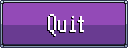
<style>
.page{position:relative;width:128px;height:48px;background:#934ab7}
.page>*{position:absolute;margin:0}
.t1{font:24px "Terminal";color:#ffffff}
</style>
<div class="page">
<p class="t1" style="left:48px;top:14px;width:36px;height:22px">Quit</p>
</div>
